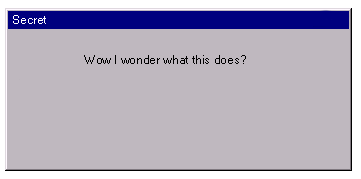
<style>
.page{position:relative;width:361px;height:179px;background:#bfb8bf}
.page>*{position:absolute;margin:0}
.t1{font:12px "MicrosoftSansSerif";color:#ffffff}
.t2{font:12px "MicrosoftSansSerif";color:#000000}
</style>
<div class="page">
<p class="t1" style="left:13px;top:15px;width:33px;height:9px">Secret</p>
<p class="t2" style="left:84px;top:55px;width:162px;height:9px">Wow I wonder what this does?</p>
</div>
